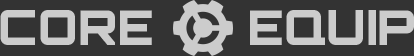
<style>
.page{position:relative;width:414px;height:56px;background:#333333}
.page>*{position:absolute;margin:0}
.t1{font:48px "Orbitron-Black";color:#cccccc;text-transform:uppercase}
</style>
<div class="page">
<p class="t1" style="left:0px;top:10px;width:152px;height:35px">Core</p>
<p class="t1" style="left:250px;top:10px;width:164px;height:35px">Equip</p>
</div>
